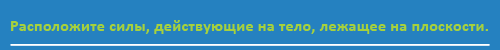
<style>
.page{position:relative;width:500px;height:50px;background:#2581c0}
.page>*{position:absolute;margin:0}
.t1{font:15.7px "Calibri-Bold";letter-spacing:0.03em;color:#a6d13d}
</style>
<div class="page">
<p class="t1" style="left:11px;top:20px;width:477px;height:14px">Расположите силы, действующие на тело, лежащее на плоскости.</p>
</div>
